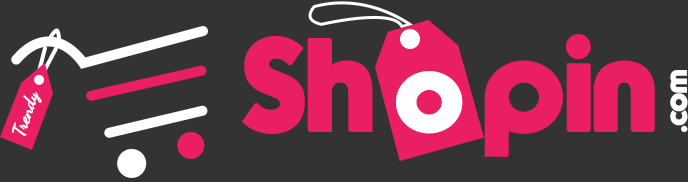
<style>
.page{position:relative;width:688px;height:182px;background:#333333}
.page>*{position:absolute;margin:0}
.t1{font:130px "TypoGraphica";color:#e91e63;font-weight:bold}
.t2{font:110px "TypoGraphica";color:#ffffff;font-weight:bold}
.t3{font:30.2px "TypoGraphica";color:#ffffff;font-weight:bold}
.t4{font:18px "DancingScript";color:#ffffff;font-weight:bold}
</style>
<div class="page">
<p class="t1" style="left:242px;top:34px;width:413px;height:123px">Sh <span class="t2">o</span> pin</p>
<p class="t3" style="left:670px;top:70px;width:18px;height:63px;rotate:-90deg">.com</p>
<p class="t4" style="left:12px;top:92px;width:30px;height:44px;rotate:-71deg">Trendy</p>
</div>
